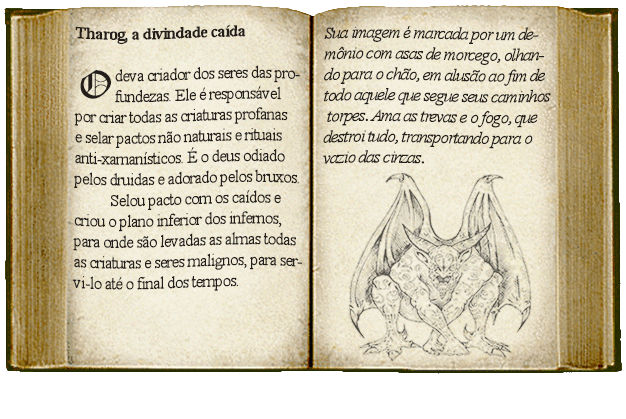
<style>
.page{position:relative;width:626px;height:419px}
.page>*{position:absolute;margin:0}
.t1{font:17.3px "TimesNewRomanPSMT";letter-spacing:-0.05em;color:#241e1a}
.t2{font:17.3px "TimesNewRomanPS-BoldMT";letter-spacing:-0.05em;color:#241e1a}
.t3{font:17.3px "TimesNewRomanPS-ItalicMT";letter-spacing:-0.05em;color:#241e1a}
.t4{font:39.5px "OldEnglishTextMT";letter-spacing:-0.05em;color:#241e1a}
</style>
<div class="page">
<p class="t1" style="left:72px;top:25px;width:230px;height:266px"><span class="t2">Tharog, a divindade caída<br></span><br>  deva criador dos seres das pro-<br>  fundezas. Ele é responsável <br>por criar todas as criaturas profanas<br>e selar pactos não naturais e rituais<br>anti-xamanísticos. É o deus odiado<br>pelos druidas e adorado pelos bruxos.<br> Selou pacto com os caídos e <br>criou o plano inferior dos infernos, <br>para onde são levadas as almas todas<br>as criaturas e seres malignos, para ser-<br>vi-lo até o final dos tempos.</p>
<p class="t3" style="left:323px;top:26px;width:228px;height:138px">Sua imagem é marcada por um de-<br>mônio com asas de morcego, olhan-<br>do para o chão, em alusão ao fim de<br>todo aquele que segue seus caminhos<br> torpes. Ama as trevas e o fogo, que <br>destroi tudo, transportando para o <br>vazio das cinzas.</p>
<p class="t4" style="left:80px;top:70px;width:31px;height:29px">O</p>
</div>
